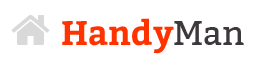
<style>
.page{position:relative;width:272px;height:66px;background:#ffffff}
.page>*{position:absolute;margin:0}
.t1{font:34px "Bitter-Bold";color:#ff3200}
.t2{font:34px "Bitter-Regular";color:#3d383c}
</style>
<div class="page">
<p class="t1" style="left:62px;top:18px;width:182px;height:36px">Handy<span class="t2">Man</span></p>
</div>
